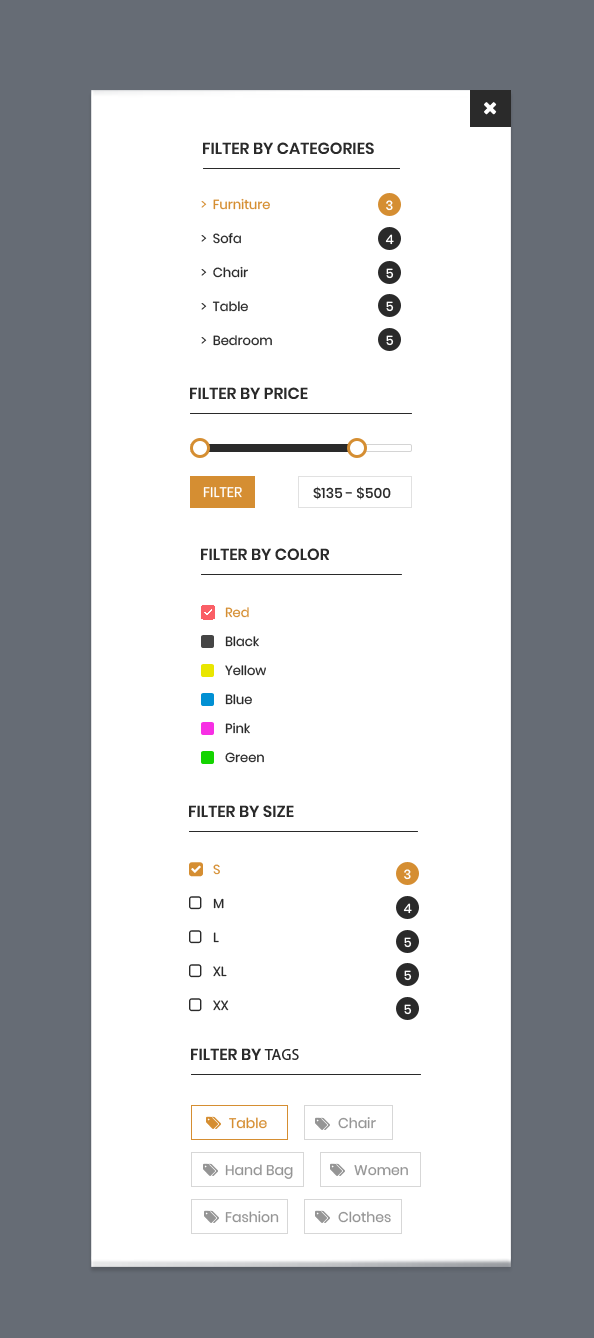
<style>
.page{position:relative;width:594px;height:1338px;background:#ffffff}
.page>*{position:absolute;margin:0}
.t1{font:16px "Poppins-SemiBold";color:#2a2a2a;text-transform:uppercase}
.t2{font:13px/34px "Poppins-Regular";color:#2a2a2a}
.t3{font:13px/34px "Poppins-Regular";color:#d58e32}
.t4{font:13px "Poppins-Medium";color:#ffffff}
.t5{font:14px "Poppins-Medium";color:#2a2a2a}
.t6{font:14px "Poppins-Regular";color:#ffffff;text-transform:uppercase}
.t7{font:13px/29px "Poppins-Regular";color:#2a2a2a}
.t8{font:13px/29px "Poppins-Regular";color:#d58e32}
.t9{font:16px "MyriadPro-Regular";color:#2a2a2a;text-transform:uppercase}
.t10{font:14px "Poppins-Regular";color:#d58e32}
.t11{font:14px "Poppins-Regular";color:#959595}
</style>
<div class="page">
<p class="t1" style="left:203px;top:142px;width:171px;height:12px">Filter By categories</p>
<p class="t2" style="left:201px;top:198px;width:71px;height:148px"><span class="t3">&gt;  Furniture<br></span>&gt;  Sofa<br>&gt;  Chair<br>&gt;  Table<br>&gt;  Bedroom</p>
<p class="t4" style="left:386px;top:200px;width:7px;height:11px">3</p>
<p class="t4" style="left:385px;top:234px;width:9px;height:11px">4</p>
<p class="t4" style="left:386px;top:268px;width:8px;height:11px">5</p>
<p class="t4" style="left:386px;top:301px;width:8px;height:11px">5</p>
<p class="t4" style="left:386px;top:335px;width:8px;height:11px">5</p>
<p class="t1" style="left:190px;top:387px;width:118px;height:12px">Filter By Price</p>
<p class="t5" style="left:313px;top:486px;width:78px;height:14px">$135 - $500</p>
<p class="t6" style="left:203px;top:487px;width:39px;height:11px">Filter</p>
<p class="t1" style="left:201px;top:548px;width:128px;height:12px">Filter By color</p>
<p class="t7" style="left:225px;top:607px;width:41px;height:156px"><span class="t8">Red<br></span>Black<br>Yellow<br>Blue<br>Pink<br>Green</p>
<p class="t1" style="left:189px;top:805px;width:105px;height:12px">Filter By size</p>
<p class="t2" style="left:213px;top:864px;width:16px;height:147px"><span class="t3">S <br></span>M <br>L <br>XL <br>XX</p>
<p class="t4" style="left:404px;top:869px;width:7px;height:11px">3</p>
<p class="t4" style="left:403px;top:903px;width:9px;height:11px">4</p>
<p class="t4" style="left:404px;top:937px;width:8px;height:11px">5</p>
<p class="t4" style="left:404px;top:970px;width:8px;height:11px">5</p>
<p class="t4" style="left:404px;top:1004px;width:8px;height:11px">5</p>
<p class="t1" style="left:191px;top:1048px;width:108px;height:12px">Filter By <span class="t9">tags</span></p>
<p class="t10" style="left:229px;top:1117px;width:38px;height:12px">Table</p>
<p class="t11" style="left:338px;top:1117px;width:38px;height:12px">Chair</p>
<p class="t11" style="left:225px;top:1164px;width:68px;height:15px">Hand Bag</p>
<p class="t11" style="left:354px;top:1165px;width:54px;height:11px">Women</p>
<p class="t11" style="left:225px;top:1211px;width:54px;height:12px">Fashion</p>
<p class="t11" style="left:338px;top:1211px;width:53px;height:12px">Clothes</p>
</div>
